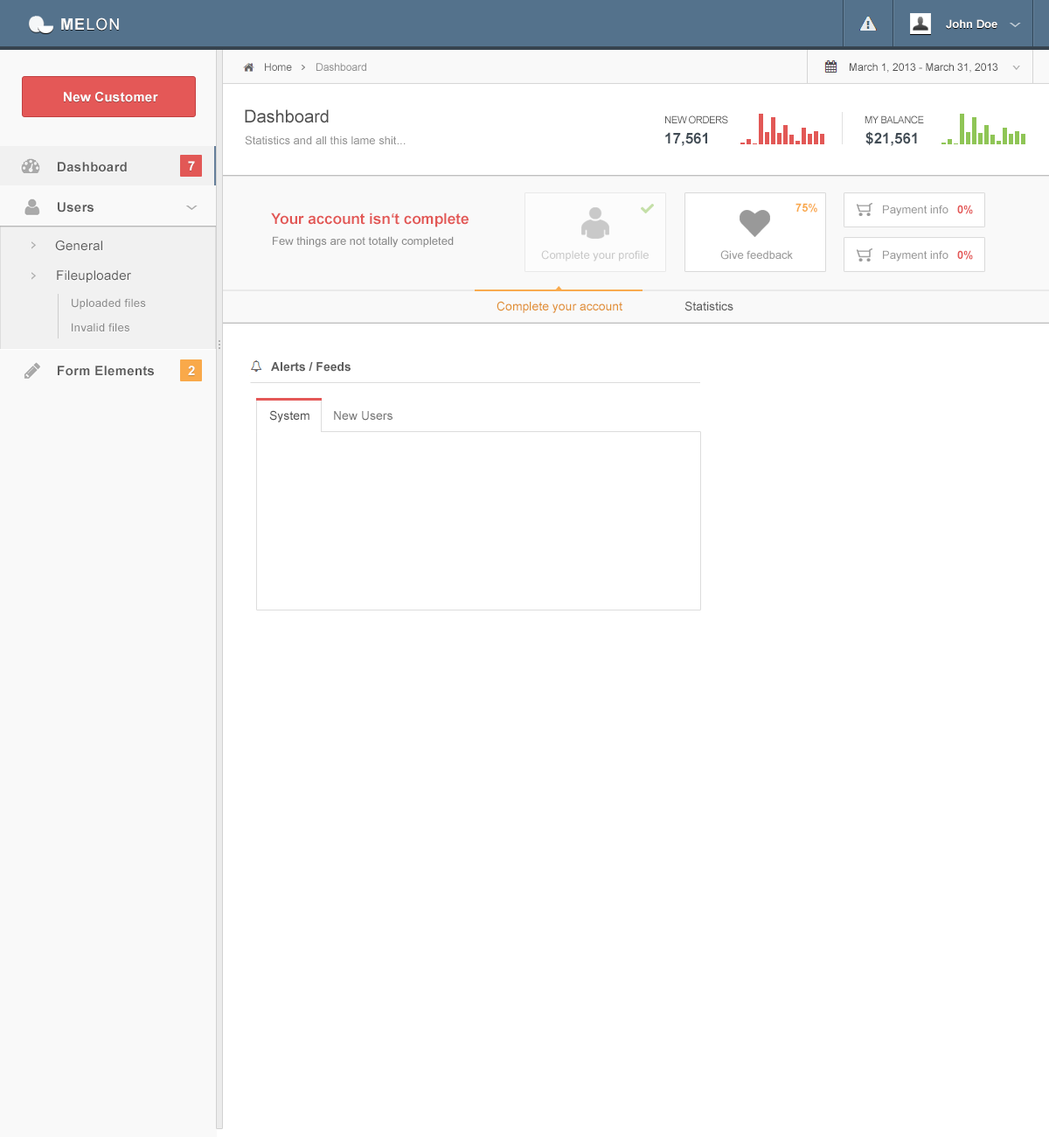
<style>
.page{position:relative;width:1049px;height:1137px;background:#ffffff}
.page>*{position:absolute;margin:0}
.t1{font:15.7px "ArialMT";letter-spacing:0.06em;color:#ffffff}
.t2{font:15.7px "Arial-BoldMT";letter-spacing:0.06em;color:#ffffff}
.t3{font:11.4px "Arial-BoldMT";color:#ffffff}
.t4{font:10.5px "ArialMT";color:#666666}
.t5{font:10.5px "ArialMT";color:#8e8e8e}
.t6{font:10.5px "ArialMT";color:#4b4b4b}
.t7{font:13.1px "Arial-BoldMT";letter-spacing:0.02em;color:#ffffff}
.t8{font:17.5px "ArialMT";color:#4e4e4e}
.t9{font:10.1px "ArialMT";letter-spacing:-0.04em;color:#5d5d5d;scale:0.97 1}
.t10{font:11.4px "ArialMT";color:#949494}
.t11{font:14.9px "Arial-BoldMT";color:#414c55}
.t12{font:13.1px "Arial-BoldMT";letter-spacing:0.02em;color:#5c5c5c}
.t13{font:11.4px "Arial-BoldMT";color:#f9a94a}
.t14{font:11.4px "ArialMT";color:#999999}
.t15{font:11.4px "Arial-BoldMT";color:#e45857}
.t16{font:14.9px "Arial-BoldMT";color:#e25856}
.t17{font:13.1px "ArialMT";letter-spacing:0.02em;color:#5c5c5c}
.t18{font:11.4px "ArialMT";color:#888888}
.t19{font:11.4px "ArialMT";color:#c9c9c9}
.t20{font:11.4px "ArialMT";letter-spacing:0.02em;color:#8a8a8a}
.t21{font:12.2px "ArialMT";color:#e19031}
.t22{font:12.2px "ArialMT";color:#5c5c5c}
.t23{font:12.2px "Arial-BoldMT";color:#5d5d5d}
.t24{font:12.2px "ArialMT";color:#4e4e4e}
.t25{font:12.2px "ArialMT";color:#747474}
</style>
<div class="page">
<p class="t1" style="left:61px;top:17px;width:58px;height:14px"><span class="t2">ME</span>LON</p>
<p class="t3" style="left:946px;top:19px;width:52px;height:10px">John Doe</p>
<p class="t4" style="left:265px;top:63px;width:27px;height:8px">Home</p>
<p class="t5" style="left:316px;top:63px;width:50px;height:8px">Dashboard</p>
<p class="t6" style="left:850px;top:63px;width:148px;height:10px">March 1, 2013 - March 31, 2013</p>
<p class="t7" style="left:64px;top:92px;width:94px;height:10px">New Customer</p>
<p class="t8" style="left:245px;top:109px;width:84px;height:14px">Dashboard</p>
<p class="t9" style="left:665px;top:115px;width:63px;height:9px">NEW ORDERS</p>
<p class="t9" style="left:865px;top:115px;width:59px;height:9px">MY BALANCE</p>
<p class="t10" style="left:245px;top:136px;width:161px;height:9px">Statistics and all this lame shit...</p>
<p class="t11" style="left:665px;top:132px;width:42px;height:14px">17,561</p>
<p class="t11" style="left:866px;top:131px;width:51px;height:15px">$21,561</p>
<p class="t12" style="left:58px;top:162px;width:69px;height:10px">Dashboard</p>
<p class="t7" style="left:188px;top:161px;width:7px;height:9px">7</p>
<p class="t12" style="left:58px;top:202px;width:36px;height:10px">Users</p>
<p class="t13" style="left:796px;top:203px;width:21px;height:9px">75%</p>
<p class="t14" style="left:883px;top:205px;width:66px;height:11px">Payment info</p>
<p class="t15" style="left:957px;top:205px;width:16px;height:9px">0%</p>
<p class="t16" style="left:271px;top:212px;width:198px;height:15px">Your account isn‘t complete</p>
<p class="t17" style="left:55px;top:240px;width:47px;height:11px">General</p>
<p class="t18" style="left:273px;top:236px;width:181px;height:11px">Few things are not totally completed</p>
<p class="t19" style="left:541px;top:250px;width:108px;height:11px">Complete your profile</p>
<p class="t14" style="left:720px;top:250px;width:73px;height:10px">Give feedback</p>
<p class="t14" style="left:883px;top:250px;width:66px;height:11px">Payment info</p>
<p class="t15" style="left:957px;top:250px;width:16px;height:10px">0%</p>
<p class="t17" style="left:57px;top:270px;width:74px;height:12px">Fileuploader</p>
<p class="t20" style="left:72px;top:298px;width:74px;height:11px">Uploaded files</p>
<p class="t21" style="left:497px;top:301px;width:125px;height:12px">Complete your account</p>
<p class="t22" style="left:685px;top:301px;width:49px;height:10px">Statistics</p>
<p class="t20" style="left:72px;top:323px;width:57px;height:8px">Invalid files</p>
<p class="t12" style="left:58px;top:365px;width:96px;height:11px">Form Elements</p>
<p class="t7" style="left:188px;top:365px;width:7px;height:10px">2</p>
<p class="t23" style="left:271px;top:362px;width:80px;height:10px">Alerts / Feeds</p>
<p class="t24" style="left:269px;top:410px;width:40px;height:12px">System</p>
<p class="t25" style="left:334px;top:411px;width:59px;height:10px">New Users</p>
</div>
